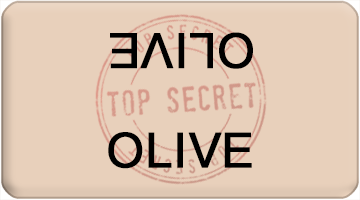
<style>
.page{position:relative;width:360px;height:200px;background:#e8d0bb}
.page>*{position:absolute;margin:0}
.t1{font:48px "ArialMT";color:#000000;font-weight:bold}
</style>
<div class="page">
<p class="t1" style="left:110px;top:32px;width:143px;height:37px;rotate:180deg">OLIVE</p>
<p class="t1" style="left:108px;top:132px;width:144px;height:37px">OLIVE</p>
</div>
